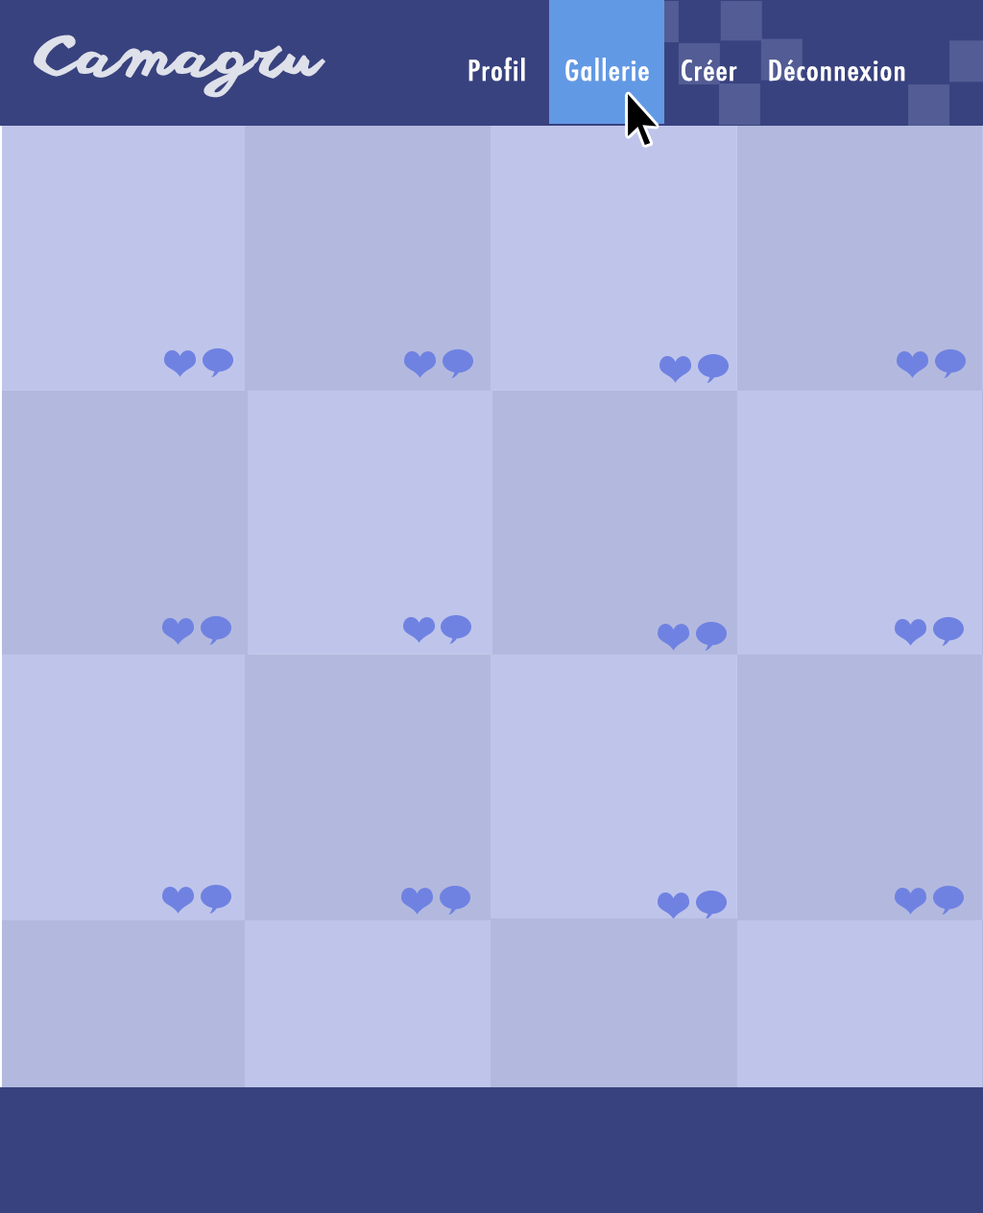
<style>
.page{position:relative;width:983px;height:1213px;background:#b3b9de}
.page>*{position:absolute;margin:0}
.t1{font:55.3px "anothershabby";color:#dee0ea;scale:1.17 1}
.t2{font:27.6px "Futura-CondensedMedium";letter-spacing:0.025em;color:#ffffff;scale:1.17 1}
</style>
<div class="page">
<p class="t1" style="left:34px;top:35px;width:291px;height:63px">Camagru</p>
<p class="t2" style="left:468px;top:57px;width:437px;height:25px">Profil     Gallerie    Créer    Déconnexion</p>
</div>
